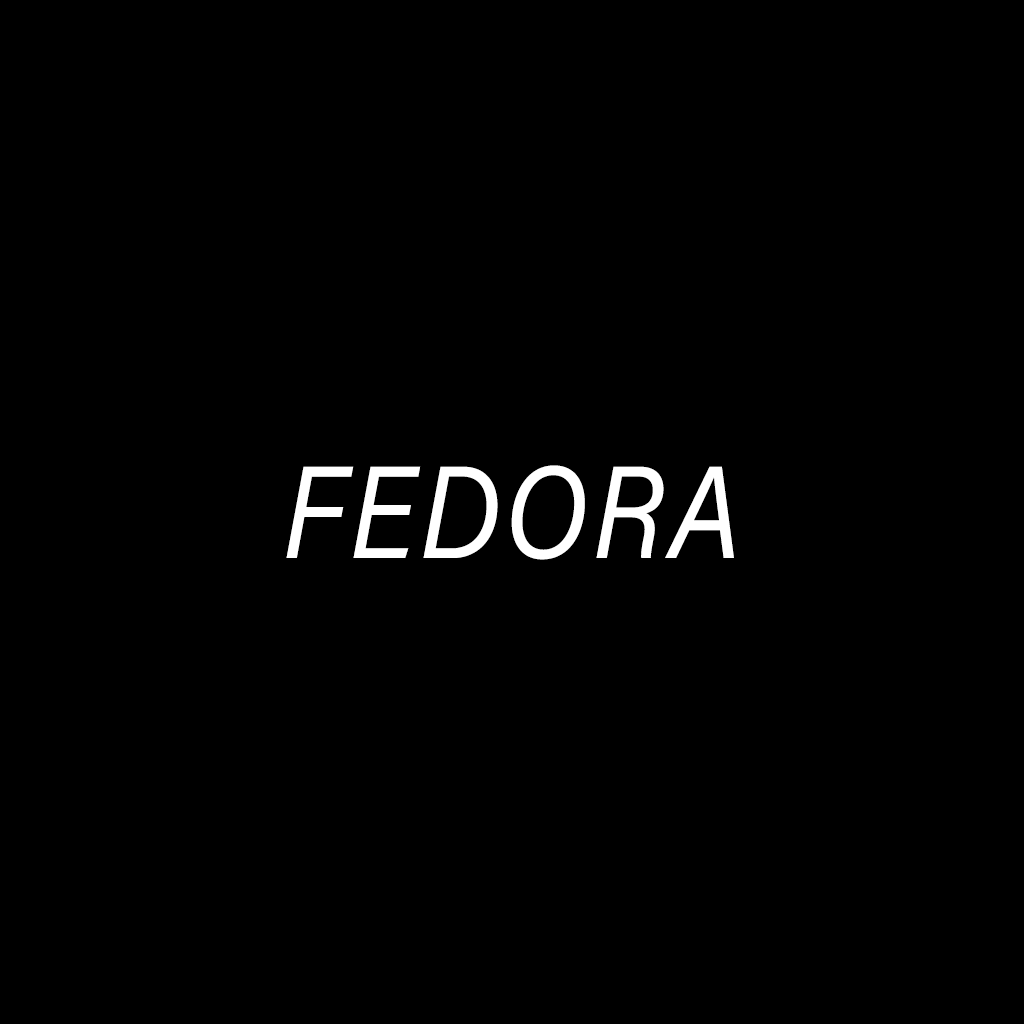
<style>
.page{position:relative;width:1024px;height:1024px;background:#000000}
.page>*{position:absolute;margin:0}
.t1{font:131px "AcuminConcept-Italic";letter-spacing:0.03em;color:#ffffff;text-transform:uppercase;scale:0.88 1}
</style>
<div class="page">
<p class="t1" style="left:286px;top:465px;width:448px;height:95px">Fedora</p>
</div>
